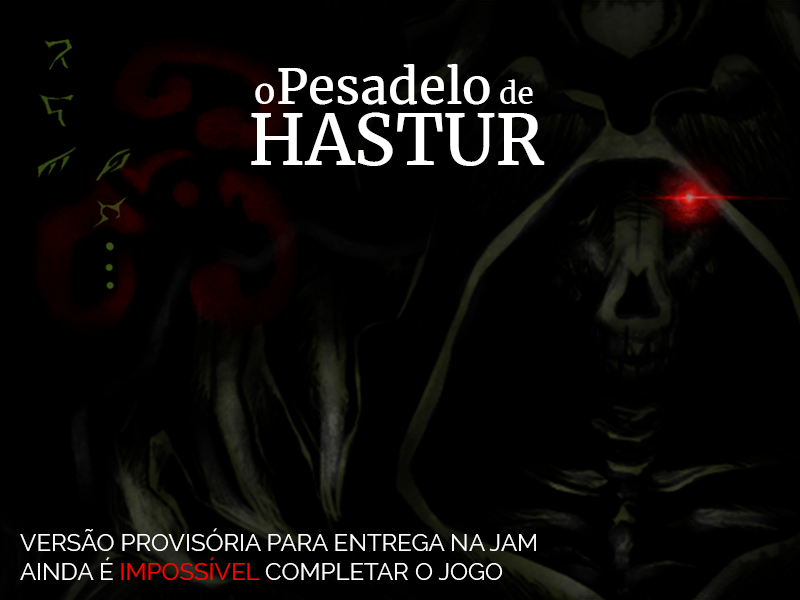
<style>
.page{position:relative;width:800px;height:600px;background:#000000}
.page>*{position:absolute;margin:0}
.t1{font:49.5px "Merriweather-Regular";color:#ffffff}
.t2{font:35.8px "Merriweather-Regular";color:#ffffff}
.t3{font:29.8px "Merriweather-Regular";color:#ffffff}
.t4{font:69.6px "Merriweather-Regular";color:#ffffff}
.t5{font:24px "Raleway-Regular";color:#ffffff}
.t6{font:24px "Raleway-Regular";color:#ff0000}
</style>
<div class="page">
<p class="t1" style="left:278px;top:63px;width:212px;height:42px">Pesadelo</p>
<p class="t2" style="left:255px;top:83px;width:19px;height:21px">o</p>
<p class="t3" style="left:500px;top:79px;width:33px;height:25px">de</p>
<p class="t4" style="left:251px;top:112px;width:294px;height:54px">HASTUR</p>
<p class="t5" style="left:20px;top:528px;width:516px;height:52px">VERSÃO PROVISÓRIA PARA ENTREGA NA JAM<br>AINDA É <span class="t6">IMPOSSÍVEL </span>COMPLETAR O JOGO</p>
</div>
